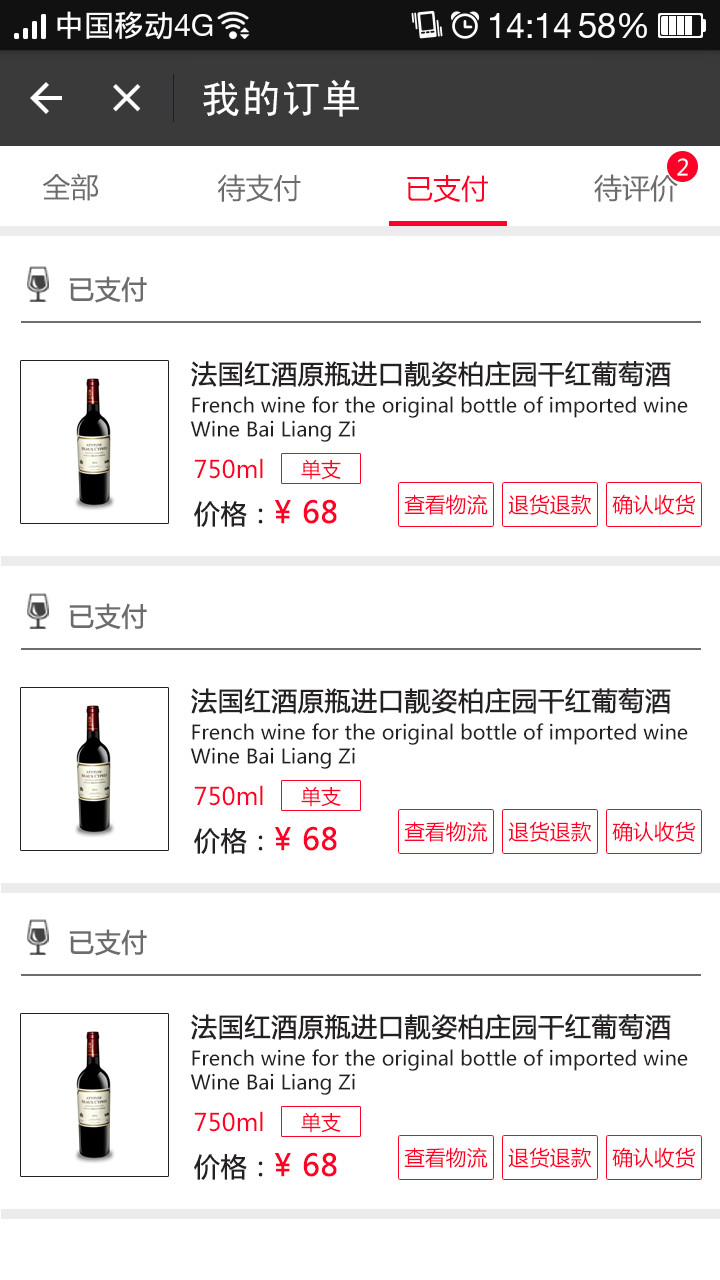
<style>
.page{position:relative;width:720px;height:1280px;background:#ffffff}
.page>*{position:absolute;margin:0}
.t1{font:40px "SimHei";color:#ffffff}
.t2{font:22px "MicrosoftYaHei";color:#ffffff}
.t3{font:28px "MicrosoftYaHei";color:#6c6c6c}
.t4{font:28px "MicrosoftYaHei";color:#ff0029}
.t5{font:26px "MicrosoftYaHei";color:#6c6c6c;font-weight:bold}
.t6{font:26px "MicrosoftYaHei";color:#242120;font-weight:bold}
.t7{font:20px "MicrosoftYaHei";color:#242120}
.t8{font:24px "MicrosoftYaHei";color:#ff0029}
.t9{font:20px "MicrosoftYaHei";color:#ff0029}
.t10{font:20.8px "MicrosoftYaHei";color:#ff0029}
.t11{font:30px "MicrosoftYaHei";color:#ff0029;font-weight:bold}
</style>
<div class="page">
<p class="t1" style="left:203px;top:79px;width:156px;height:38px">我的订单</p>
<p class="t2" style="left:677px;top:158px;width:11px;height:18px">2</p>
<p class="t3" style="left:43px;top:173px;width:55px;height:28px">全部</p>
<p class="t3" style="left:218px;top:174px;width:83px;height:28px">待支付</p>
<p class="t3" style="left:594px;top:174px;width:84px;height:28px">待评价</p>
<p class="t4" style="left:407px;top:175px;width:81px;height:28px">已支付</p>
<p class="t5" style="left:69px;top:276px;width:78px;height:27px">已支付</p>
<p class="t6" style="left:191px;top:361px;width:480px;height:26px">法国红酒原瓶进口靓姿柏庄园干红葡萄酒</p>
<p class="t7" style="left:190px;top:396px;width:498px;height:46px">French wine for the original bottle of imported wine <br>Wine Bai Liang Zi</p>
<p class="t8" style="left:194px;top:458px;width:69px;height:21px">750ml</p>
<p class="t9" style="left:301px;top:459px;width:40px;height:21px">单支</p>
<p class="t10" style="left:404px;top:494px;width:84px;height:21px">查看物流</p>
<p class="t10" style="left:508px;top:494px;width:84px;height:21px">退货退款</p>
<p class="t10" style="left:612px;top:494px;width:83px;height:21px">确认收货</p>
<p class="t11" style="left:194px;top:499px;width:143px;height:28px"><span class="t6">价格：</span>¥ 68</p>
<p class="t5" style="left:69px;top:603px;width:78px;height:27px">已支付</p>
<p class="t6" style="left:191px;top:688px;width:480px;height:26px">法国红酒原瓶进口靓姿柏庄园干红葡萄酒</p>
<p class="t7" style="left:190px;top:723px;width:498px;height:46px">French wine for the original bottle of imported wine <br>Wine Bai Liang Zi</p>
<p class="t8" style="left:194px;top:785px;width:69px;height:21px">750ml</p>
<p class="t9" style="left:301px;top:786px;width:40px;height:21px">单支</p>
<p class="t10" style="left:404px;top:821px;width:84px;height:21px">查看物流</p>
<p class="t10" style="left:508px;top:821px;width:84px;height:21px">退货退款</p>
<p class="t10" style="left:612px;top:821px;width:83px;height:21px">确认收货</p>
<p class="t11" style="left:194px;top:826px;width:143px;height:28px"><span class="t6">价格：</span>¥ 68</p>
<p class="t5" style="left:69px;top:929px;width:78px;height:27px">已支付</p>
<p class="t6" style="left:191px;top:1014px;width:480px;height:26px">法国红酒原瓶进口靓姿柏庄园干红葡萄酒</p>
<p class="t7" style="left:190px;top:1049px;width:498px;height:46px">French wine for the original bottle of imported wine <br>Wine Bai Liang Zi</p>
<p class="t8" style="left:194px;top:1111px;width:69px;height:21px">750ml</p>
<p class="t9" style="left:301px;top:1112px;width:40px;height:21px">单支</p>
<p class="t11" style="left:194px;top:1152px;width:143px;height:28px"><span class="t6">价格：</span>¥ 68</p>
<p class="t10" style="left:404px;top:1147px;width:84px;height:21px">查看物流</p>
<p class="t10" style="left:508px;top:1147px;width:84px;height:21px">退货退款</p>
<p class="t10" style="left:612px;top:1147px;width:83px;height:21px">确认收货</p>
</div>
